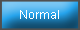
<style>
.page{position:relative;width:80px;height:30px}
.page>*{position:absolute;margin:0}
.t1{font:12px "ArialMT";color:#ffffff}
</style>
<div class="page">
<p class="t1" style="left:20px;top:10px;width:39px;height:9px">Normal</p>
</div>
